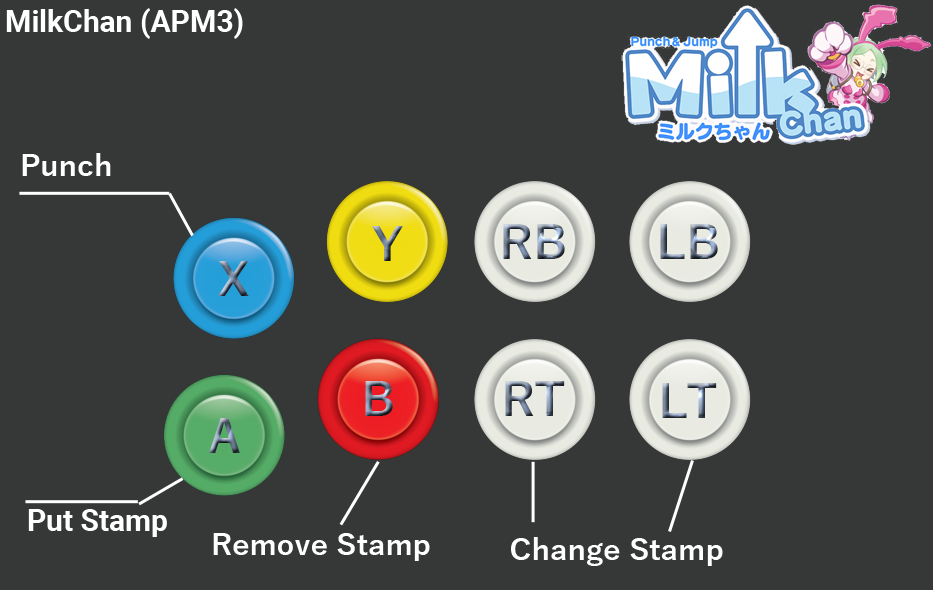
<style>
.page{position:relative;width:933px;height:590px;background:#363838}
.page>*{position:absolute;margin:0}
.t1{font:30px "Roboto-Bold";color:#ffffff}
.t2{font:30px "YuGothic-Bold";color:#ffffff}
</style>
<div class="page">
<p class="t1" style="left:6px;top:8px;width:237px;height:31px">MilkChan (APM3)</p>
<p class="t2" style="left:22px;top:153px;width:89px;height:23px">Punch</p>
<p class="t1" style="left:28px;top:509px;width:139px;height:28px">Put Stamp</p>
<p class="t2" style="left:213px;top:533px;width:217px;height:28px">Remove Stamp</p>
<p class="t2" style="left:511px;top:537px;width:212px;height:29px">Change Stamp</p>
</div>
